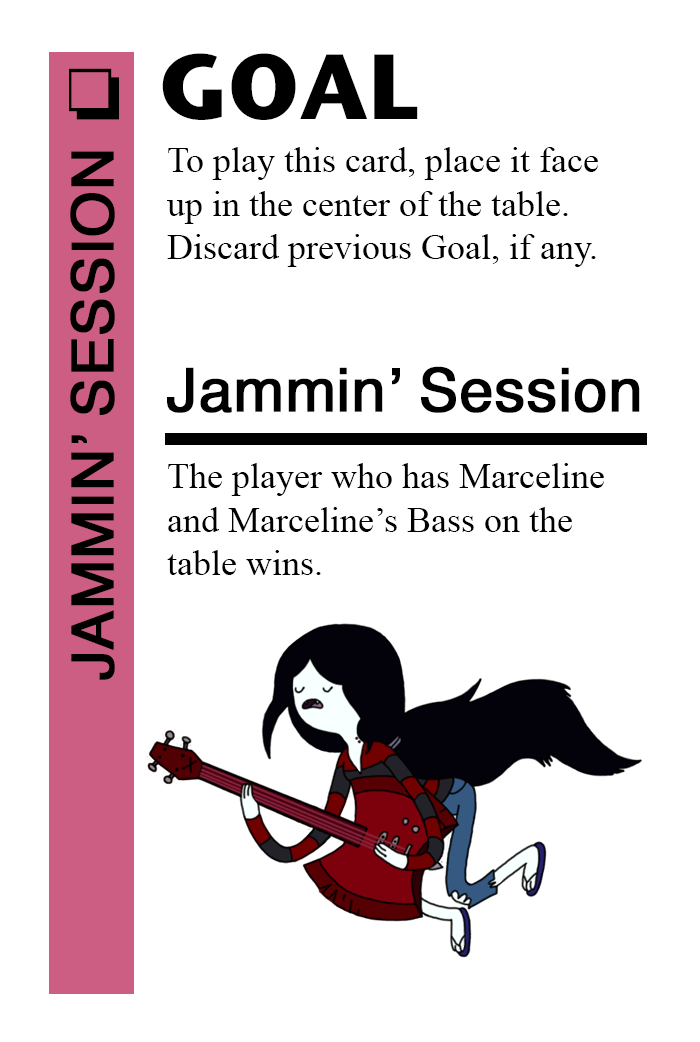
<style>
.page{position:relative;width:700px;height:1042px;background:#ffffff}
.page>*{position:absolute;margin:0}
.t1{font:92px "StoneSansITC-Bold";color:#000000}
.t2{font:72px "MS-Gothic";color:#000000}
.t3{font:36px "TimesNewRomanPSMT";color:#000000}
.t4{font:58px "Helvetica";color:#000000;font-weight:bold}
.t5{font:60px "Helvetica";color:#000000;font-weight:bold}
</style>
<div class="page">
<p class="t1" style="left:162px;top:53px;width:256px;height:67px">GOAL</p>
<p class="t2" style="left:69px;top:68px;width:50px;height:52px">❏</p>
<p class="t3" style="left:167px;top:147px;width:431px;height:120px">To play this card, place it face<br>up in the center of the table.<br>Discard previous Goal, if any.</p>
<p class="t4" style="left:70px;top:151px;width:45px;height:529px;rotate:-90deg">JAMMIN’ SESSION</p>
<p class="t5" style="left:167px;top:366px;width:473px;height:47px">Jammin’ Session</p>
<p class="t3" style="left:167px;top:463px;width:437px;height:112px">The player who has Marceline <br>and Marceline’s Bass on the <br>table wins.</p>
</div>
